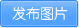
<style>
.page{position:relative;width:79px;height:28px}
.page>*{position:absolute;margin:0}
.t1{font:14px "YouYuan";color:#ffffff}
</style>
<div class="page">
<p class="t1" style="left:12px;top:6px;width:56px;height:15px">发布图片</p>
</div>
